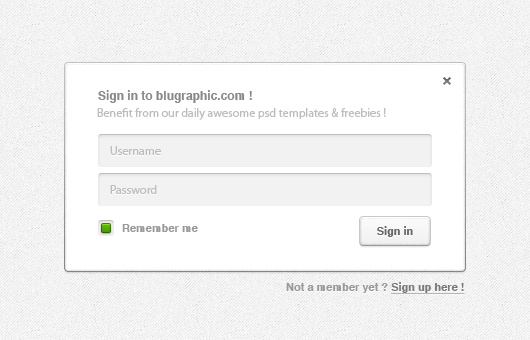
<style>
.page{position:relative;width:530px;height:340px;background:#ffffff}
.page>*{position:absolute;margin:0}
.t1{font:12px "Helvetica-Bold";color:#888888}
.t2{font:12px "MyriadPro-Regular";color:#bdbdbd}
.t3{font:11px "Helvetica-Bold";color:#999999}
.t4{font:11px "Helvetica-Bold";color:#666666}
.t5{font:11px "Helvetica-Bold";color:#797979;text-decoration:underline}
</style>
<div class="page">
<p class="t1" style="left:98px;top:90px;width:154px;height:13px">Sign in to blugraphic.com !</p>
<p class="t2" style="left:97px;top:108px;width:289px;height:12px">Benefit from our daily awesome psd templates &amp; freebies !</p>
<p class="t2" style="left:110px;top:146px;width:51px;height:9px">Username</p>
<p class="t2" style="left:110px;top:185px;width:47px;height:9px">Password</p>
<p class="t3" style="left:122px;top:224px;width:76px;height:8px">Remember me</p>
<p class="t4" style="left:377px;top:226px;width:36px;height:11px">Sign in</p>
<p class="t3" style="left:286px;top:282px;width:179px;height:12px">Not a member yet ? <span class="t5">Sign up here !</span></p>
</div>
